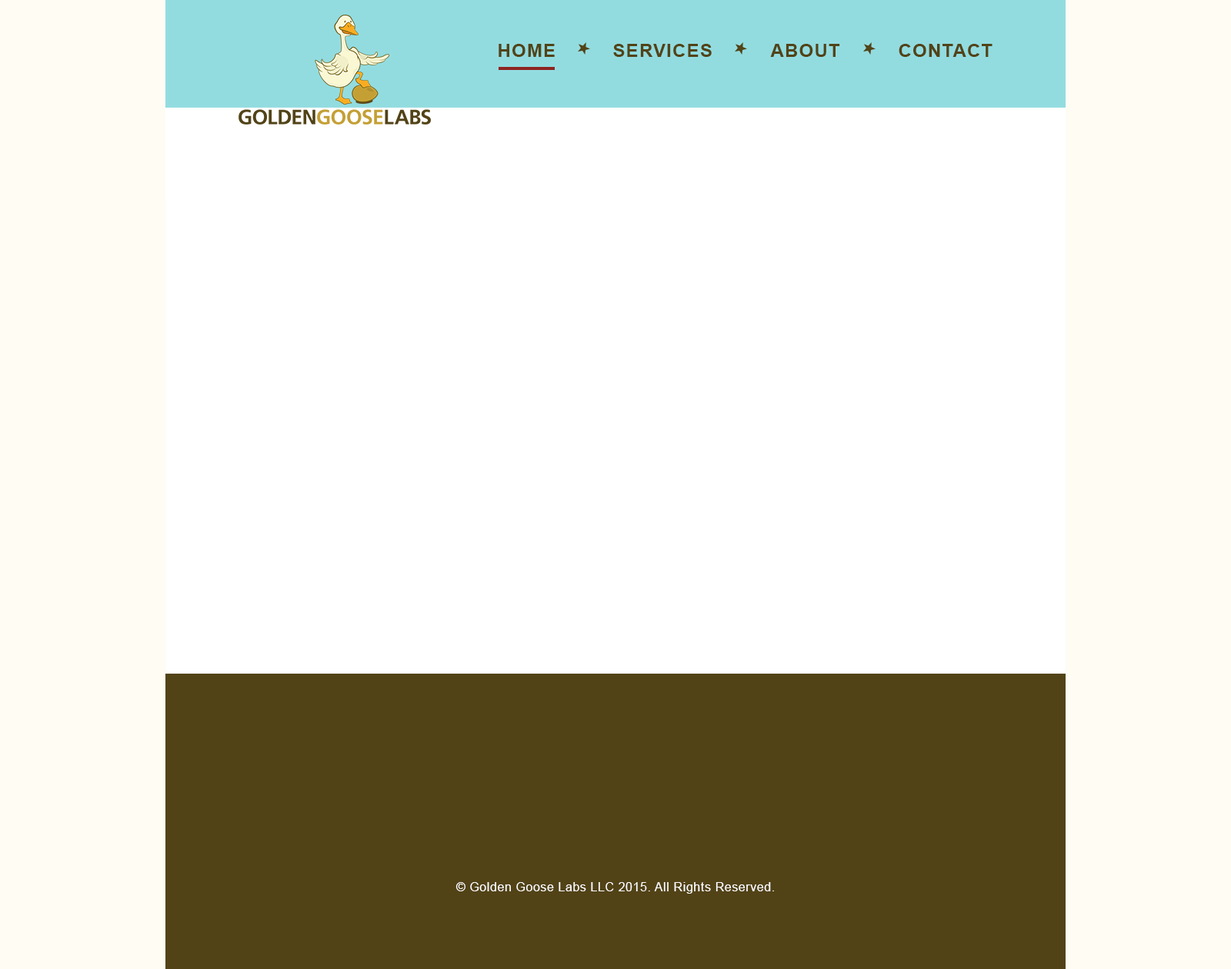
<style>
.page{position:relative;width:1231px;height:969px;background:#ffffff}
.page>*{position:absolute;margin:0}
.t1{font:18.5px "Arial-BoldMT";letter-spacing:0.05em;color:#524317;text-transform:uppercase}
.t2{font:12.3px "ArialMT";letter-spacing:0.05em;color:#ffffff}
</style>
<div class="page">
<p class="t1" style="left:498px;top:44px;width:57px;height:13px">Home</p>
<p class="t1" style="left:613px;top:44px;width:98px;height:13px">Services</p>
<p class="t1" style="left:770px;top:44px;width:70px;height:13px">About</p>
<p class="t1" style="left:898px;top:44px;width:94px;height:13px">Contact</p>
<p class="t2" style="left:455px;top:882px;width:319px;height:12px">© Golden Goose Labs LLC 2015. All Rights Reserved.</p>
</div>
